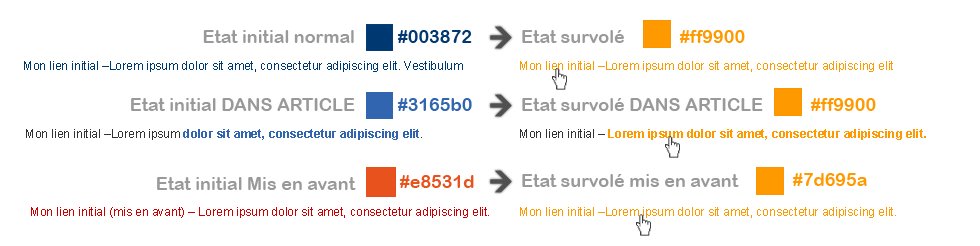
<style>
.page{position:relative;width:980px;height:246px;background:#ffffff}
.page>*{position:absolute;margin:0}
.t1{font:18px "ArialRoundedMTBold";color:#999999}
.t2{font:18px "ArialRoundedMTBold";color:#003872}
.t3{font:18px "ArialRoundedMTBold";color:#ff9900}
.t4{font:12px "ArialMT";color:#003872}
.t5{font:12px "ArialMT";color:#ff9900}
.t6{font:18px "ArialRoundedMTBold";color:#3165b0}
.t7{font:12px "Arial-BoldMT";color:#3165b0}
.t8{font:12px "ArialMT";color:#333333}
.t9{font:12px "Arial-BoldMT";color:#ff9900}
.t10{font:18px "ArialRoundedMTBold";color:#e8531d}
.t11{font:12px "ArialMT";color:#cc0000}
</style>
<div class="page">
<p class="t1" style="left:203px;top:30px;width:151px;height:13px">Etat initial normal</p>
<p class="t2" style="left:397px;top:30px;width:75px;height:13px">#003872</p>
<p class="t1" style="left:522px;top:30px;width:102px;height:13px">Etat survolé</p>
<p class="t3" style="left:679px;top:30px;width:66px;height:13px">#ff9900</p>
<p class="t4" style="left:24px;top:61px;width:439px;height:11px">Mon lien initial –Lorem ipsum dolor sit amet, consectetur adipiscing elit. Vestibulum</p>
<p class="t5" style="left:520px;top:61px;width:373px;height:11px">Mon lien initial –Lorem ipsum dolor sit amet, consectetur adipiscing elit</p>
<p class="t1" style="left:131px;top:98px;width:224px;height:13px">Etat initial DANS ARTICLE</p>
<p class="t6" style="left:397px;top:98px;width:75px;height:13px">#3165b0</p>
<p class="t1" style="left:522px;top:98px;width:241px;height:13px">Etat survolé DANS ARTICLE</p>
<p class="t3" style="left:810px;top:98px;width:66px;height:13px">#ff9900</p>
<p class="t7" style="left:26px;top:129px;width:396px;height:11px"><span class="t8">Mon lien initial –Lorem ipsum</span> dolor sit amet, consectetur adipiscing elit<span class="t8">.</span></p>
<p class="t9" style="left:520px;top:129px;width:406px;height:11px"><span class="t8">Mon lien initial – </span>Lorem ipsum dolor sit amet, consectetur adipiscing elit.</p>
<p class="t1" style="left:522px;top:174px;width:217px;height:13px">Etat survolé mis en avant</p>
<p class="t3" style="left:792px;top:173px;width:75px;height:13px">#7d695a</p>
<p class="t1" style="left:157px;top:177px;width:199px;height:13px">Etat initial Mis en avant</p>
<p class="t10" style="left:399px;top:175px;width:75px;height:13px">#e8531d</p>
<p class="t11" style="left:31px;top:207px;width:458px;height:11px">Mon lien initial (mis en avant) – Lorem ipsum dolor sit amet, consectetur adipiscing elit.</p>
<p class="t5" style="left:520px;top:207px;width:376px;height:11px">Mon lien initial –Lorem ipsum dolor sit amet, consectetur adipiscing elit.</p>
</div>
